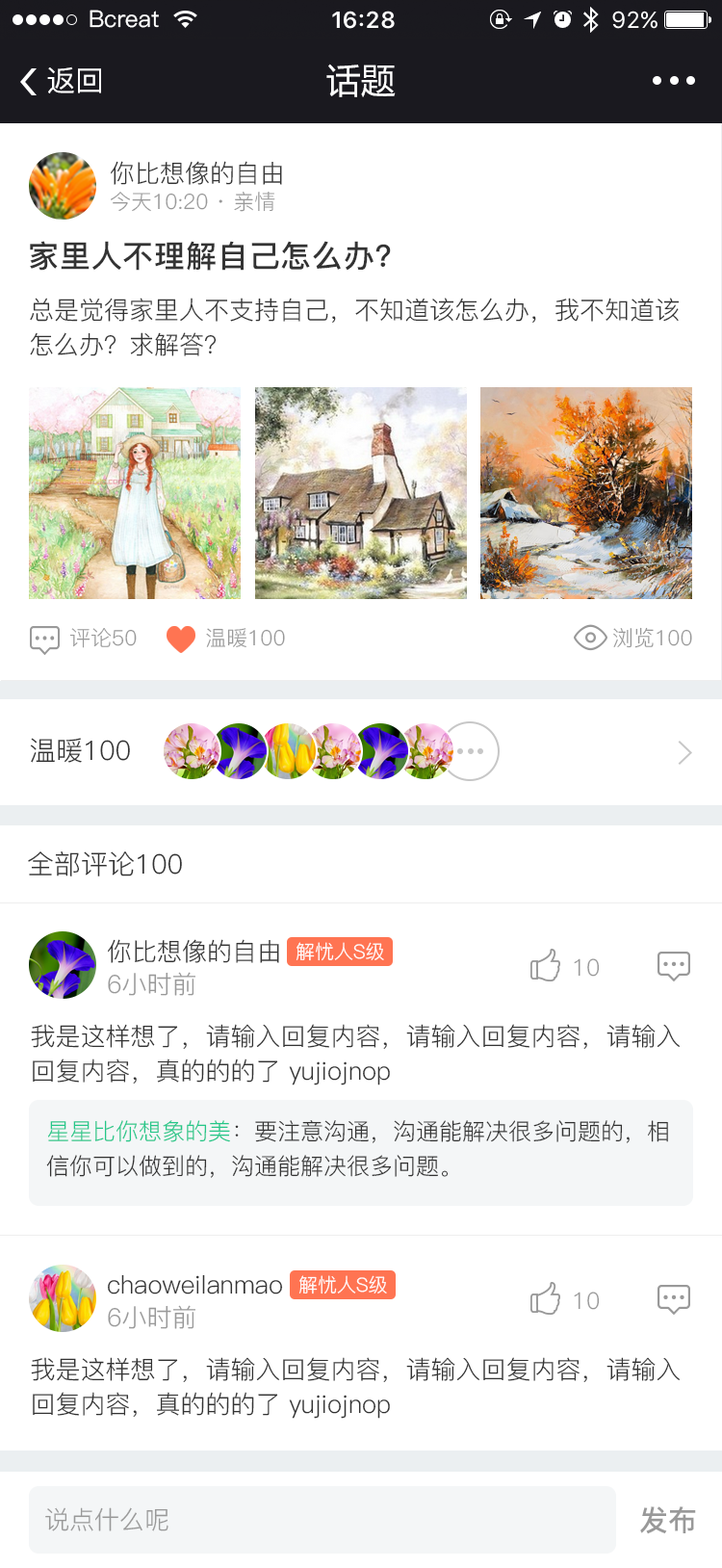
<style>
.page{position:relative;width:722px;height:1568px;background:#ffffff}
.page>*{position:absolute;margin:0}
.t1{font:23.1px "PingFang-SC-Medium";color:#ffffff}
.t2{font:34.7px "MicrosoftYaHei";color:#ffffff}
.t3{font:28.9px "PingFang-SC-Medium";color:#ffffff}
.t4{font:25px "PingFang-SC-Regular";color:#333333}
.t5{font:21.2px "PingFang-SC-Regular";color:#999999}
.t6{font:30.8px "PingFang-SC-Bold";letter-spacing:0.025em;color:#333333}
.t7{font:25px/34.7px "PingFang-SC-Regular";color:#333333}
.t8{font:27px "PingFang-SC-Regular";color:#333333}
.t9{font:19.3px "PingFang-SC-Regular";color:#ffffff}
.t10{font:23.1px "PingFang-SC-Regular";letter-spacing:0.025em;color:#999999}
.t11{font:25px "PingFang-SC-Regular";color:#999999}
.t12{font:23.1px/34.7px "PingFang-SC-Regular";color:#333333}
.t13{font:23.1px/34.7px "PingFang-SC-Regular";color:#24c789}
.t14{font:28.9px "PingFang-SC-Bold";color:#999999}
</style>
<div class="page">
<p class="t1" style="left:90px;top:10px;width:69px;height:18px">Bcreat</p>
<p class="t2" style="left:327px;top:64px;width:69px;height:33px">话题</p>
<p class="t3" style="left:47px;top:66px;width:54px;height:27px">返回</p>
<p class="t4" style="left:111px;top:161px;width:171px;height:24px">你比想像的自由</p>
<p class="t5" style="left:111px;top:192px;width:164px;height:20px">今天10:20 · 亲情</p>
<p class="t6" style="left:30px;top:241px;width:361px;height:30px">家里人不理解自己怎么办？</p>
<p class="t7" style="left:30px;top:298px;width:650px;height:58px">总是觉得家里人不支持自己，不知道该怎么办，我不知道该怎么办？求解答？</p>
<p class="t5" style="left:69px;top:628px;width:68px;height:20px">评论50</p>
<p class="t5" style="left:206px;top:628px;width:79px;height:19px">温暖100</p>
<p class="t5" style="left:614px;top:627px;width:79px;height:21px">浏览100</p>
<p class="t8" style="left:30px;top:738px;width:100px;height:25px">温暖100</p>
<p class="t8" style="left:28px;top:851px;width:154px;height:25px">全部评论100</p>
<p class="t4" style="left:108px;top:939px;width:171px;height:24px">你比想像的自由</p>
<p class="t9" style="left:296px;top:942px;width:88px;height:19px">解忧人S级</p>
<p class="t10" style="left:574px;top:958px;width:26px;height:19px">10</p>
<p class="t11" style="left:108px;top:972px;width:88px;height:24px">6小时前</p>
<p class="t7" style="left:31px;top:1024px;width:650px;height:61px">我是这样想了，请输入回复内容，请输入回复内容，请输入<br>回复内容，真的的的了 yujiojnop</p>
<p class="t12" style="left:46px;top:1120px;width:622px;height:58px"><span class="t13">星星比你想象的美</span>：要注意沟通，沟通能解决很多问题的，相<br>信你可以做到的，沟通能解决很多问题。</p>
<p class="t4" style="left:108px;top:1274px;width:175px;height:20px">chaoweilanmao</p>
<p class="t9" style="left:299px;top:1275px;width:88px;height:19px">解忧人S级</p>
<p class="t10" style="left:574px;top:1292px;width:26px;height:18px">10</p>
<p class="t11" style="left:108px;top:1305px;width:88px;height:24px">6小时前</p>
<p class="t7" style="left:31px;top:1357px;width:650px;height:62px">我是这样想了，请输入回复内容，请输入回复内容，请输入<br>回复内容，真的的的了 yujiojnop</p>
<p class="t11" style="left:45px;top:1507px;width:124px;height:24px">说点什么呢</p>
<p class="t14" style="left:640px;top:1506px;width:56px;height:28px">发布</p>
</div>
